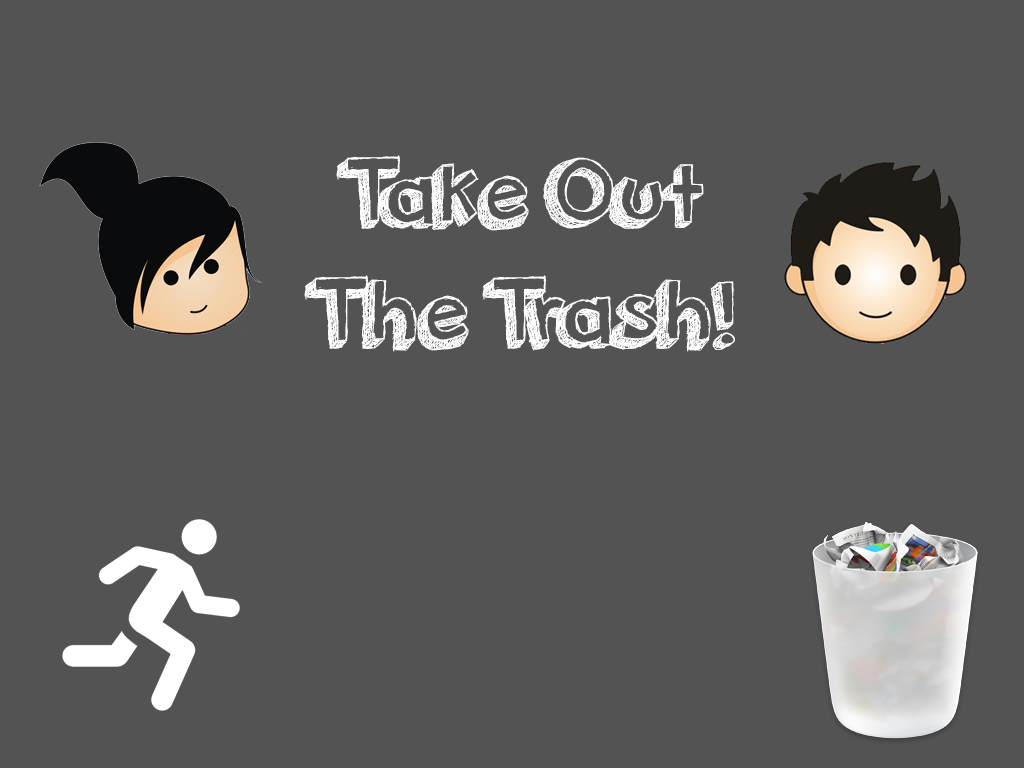
<style>
.page{position:relative;width:1024px;height:768px;background:#535353}
.page>*{position:absolute;margin:0}
.t1{font:100px "orangejuice";color:#ffffff}
</style>
<div class="page">
<p class="t1" style="left:304px;top:155px;width:431px;height:197px;text-align:center">Take Out<br>The Trash!</p>
</div>
